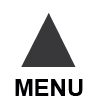
<style>
.page{position:relative;width:100px;height:100px;background:#ffffff}
.page>*{position:absolute;margin:0}
.t1{font:24px "Arial-BoldMT";letter-spacing:-0.005em;color:#000003}
</style>
<div class="page">
<p class="t1" style="left:15px;top:79px;width:68px;height:17px">MENU</p>
</div>
